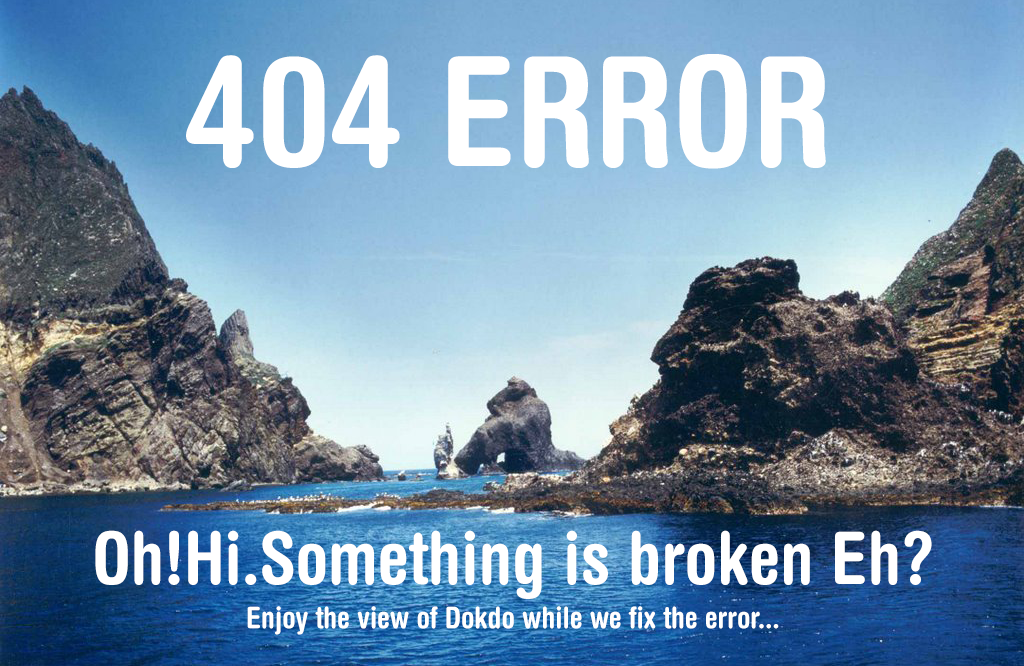
<style>
.page{position:relative;width:1024px;height:666px}
.page>*{position:absolute;margin:0}
.t1{font:152px "HelveticaRoundedLTStd-BdCn";color:#ffffff}
.t2{font:72.6px "HelveticaRoundedLTStd-BdCn";color:#ffffff}
.t3{font:30px "HelveticaRoundedLTStd-BdCn";color:#ffffff}
</style>
<div class="page">
<p class="t1" style="left:186px;top:54px;width:640px;height:115px">404 ERROR</p>
<p class="t2" style="left:95px;top:530px;width:837px;height:69px">Oh!Hi.Something is broken Eh?</p>
<p class="t3" style="left:247px;top:606px;width:532px;height:29px">Enjoy the view of Dokdo while we fix the error...</p>
</div>
